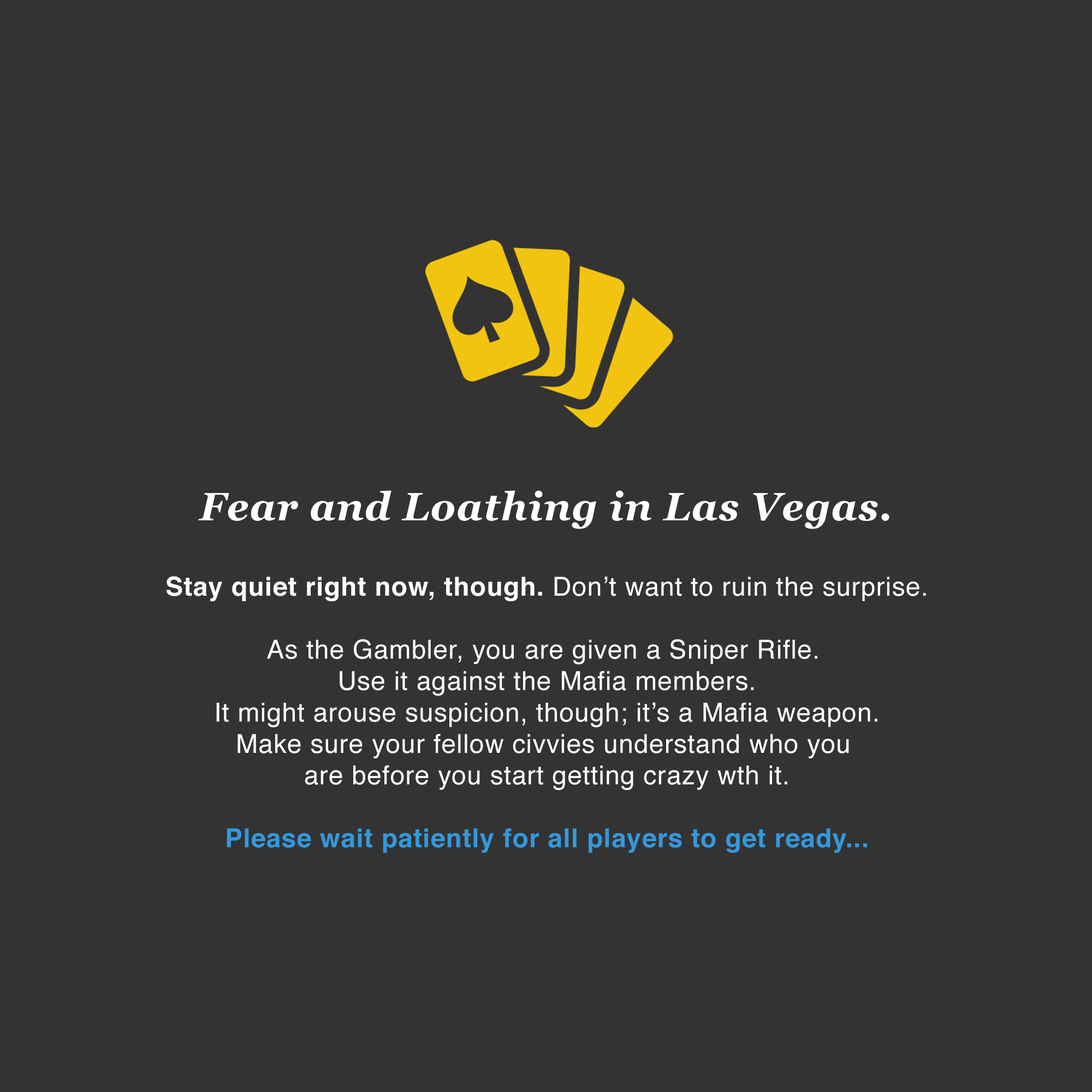
<style>
.page{position:relative;width:1092px;height:1092px;background:#333333}
.page>*{position:absolute;margin:0}
.t1{font:39.3px "Georgia-BoldItalic";letter-spacing:0.025em;color:#ffffff}
.t2{font:26.2px "Helvetica";letter-spacing:0.025em;color:#ffffff}
.t3{font:26.2px "Helvetica-Bold";letter-spacing:0.025em;color:#ffffff}
.t4{font:26.2px "Helvetica-Bold";letter-spacing:0.025em;color:#3498db}
</style>
<div class="page">
<p class="t1" style="left:198px;top:490px;width:691px;height:39px">Fear and Loathing in Las Vegas.</p>
<p class="t2" style="left:167px;top:576px;width:759px;height:277px;text-align:center"><span class="t3">Stay quiet right now, though.</span> Don’t want to ruin the surprise.<br><br>As the Gambler, you are given a Sniper Rifle. <br>Use it against the Mafia members.<br>It might arouse suspicion, though; it’s a Mafia weapon.<br>Make sure your fellow civvies understand who you <br>are before you start getting crazy wth it.<br><br><span class="t4">Please wait patiently for all players to get ready...</span></p>
</div>
